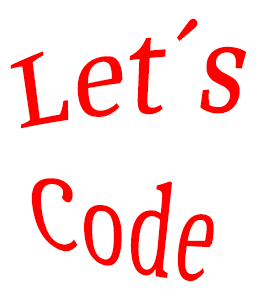
<style>
.page{position:relative;width:267px;height:306px;background:#ffffff}
.page>*{position:absolute;margin:0}
.t1{font:100px "Caladea-Regular";color:#ff0000}
</style>
<div class="page">
<p class="t1" style="left:10px;top:18px;width:237px;height:264px;text-align:center">Let´s<br>Code</p>
</div>
